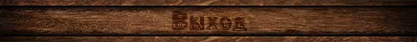
<style>
.page{position:relative;width:417px;height:42px}
.page>*{position:absolute;margin:0}
.t1{font:24px "WoodenShipDecorated";color:#421a09}
</style>
<div class="page">
<p class="t1" style="left:171px;top:10px;width:76px;height:21px">Выход</p>
</div>
